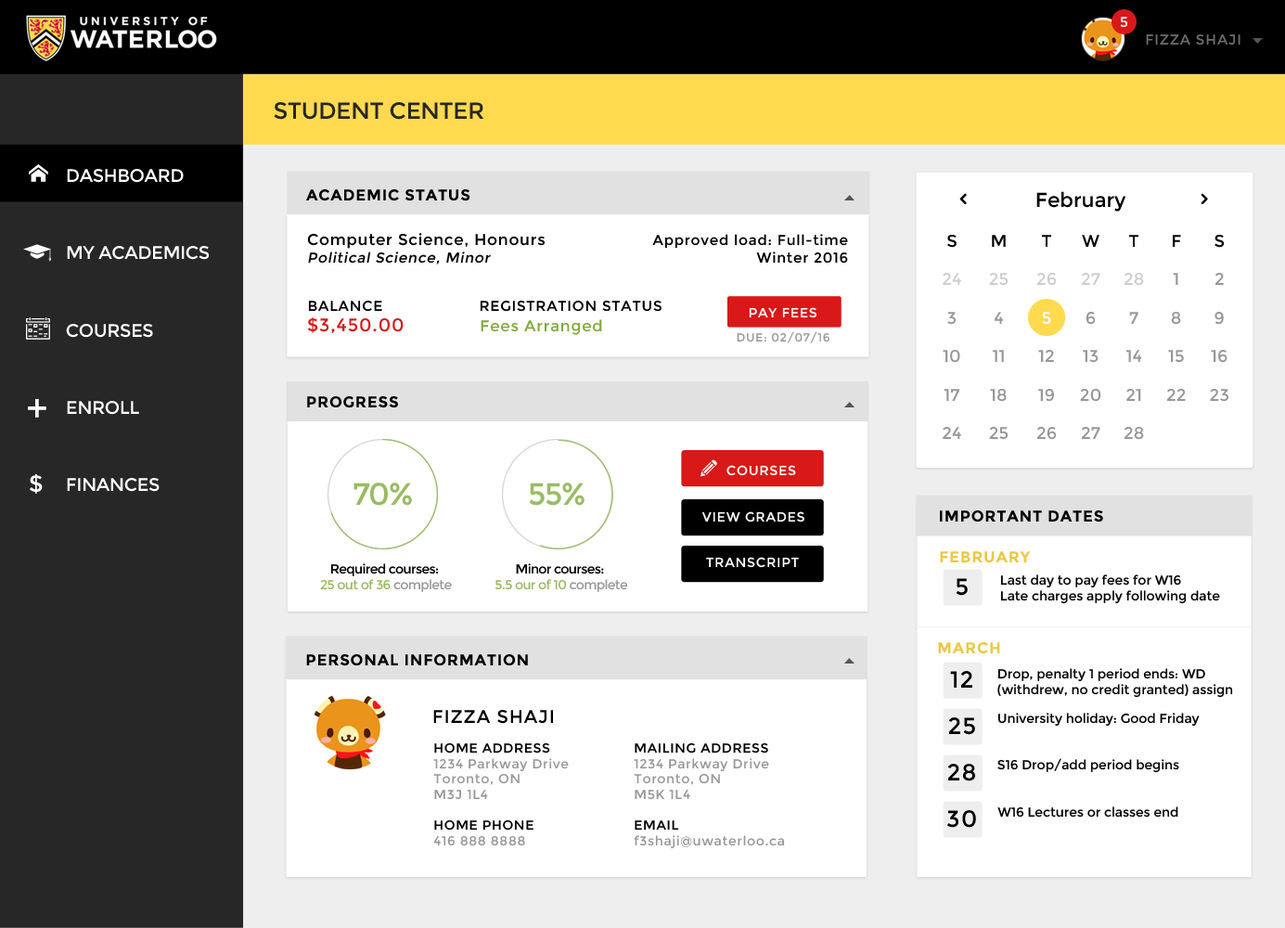
<style>
.page{position:relative;width:1285px;height:928px;background:#ffffff}
.page>*{position:absolute;margin:0}
.t1{font:14.2px "Montserrat-Regular";letter-spacing:0.05em;color:#eeeeee;text-transform:uppercase}
.t2{font:14.2px "Montserrat-Regular";letter-spacing:0.05em;color:#6b6b6b;text-transform:uppercase}
.t3{font:23.2px "Montserrat-Regular";letter-spacing:-0.02em;color:#272727;text-transform:uppercase}
.t4{font:18px/77.3px "Montserrat-Regular";letter-spacing:-0.02em;color:#ffffff;text-transform:uppercase}
.t5{font:15.5px "Montserrat-Bold";letter-spacing:0.05em;color:#000000;text-transform:uppercase}
.t6{font:20.2px "Montserrat-Regular";color:#000000}
.t7{font:15.5px/18px "Montserrat-Regular";letter-spacing:0.05em;color:#000000}
.t8{font:14.2px/18px "Montserrat-Regular";letter-spacing:0.05em;color:#000000;font-style:italic}
.t9{font:14.2px/18px "Montserrat-Regular";letter-spacing:0.05em;color:#000000}
.t10{font:17px/38.6px "Montserrat-Regular";color:#989898}
.t11{font:17px/38.6px "Montserrat-Regular";color:#000000}
.t12{font:17px/38.6px "Montserrat-Regular";color:#ffffff}
.t13{font:17px "Montserrat-Regular";color:#cecece}
.t14{font:14.2px "Montserrat-Regular";letter-spacing:0.05em;color:#000000;text-transform:uppercase}
.t15{font:15.5px "Montserrat-Regular";letter-spacing:0.05em;color:#80ab3c}
.t16{font:18px "Montserrat-Regular";letter-spacing:0.05em;color:#d91818}
.t17{font:13.2px "Montserrat-Regular";letter-spacing:0.05em;color:#ffffff;text-transform:uppercase}
.t18{font:11.6px "Montserrat-Regular";letter-spacing:0.05em;color:#989898;text-transform:uppercase}
.t19{font:38.7px "Montserrat-Regular";color:#ffffff}
.t20{font:23.2px "Montserrat-Regular";color:#ffffff}
.t21{font:30.9px "Montserrat-Regular";letter-spacing:-0.04em;color:#99bc63}
.t22{font:15.5px "Montserrat-Bold";letter-spacing:0.05em;color:#eac848;text-transform:uppercase}
.t23{font:12.9px/15.8px "Montserrat-Regular";letter-spacing:-0.04em;color:#000000}
.t24{font:12.9px/15.8px "Montserrat-Regular";letter-spacing:-0.04em;color:#99bc63}
.t25{font:12.9px/15.8px "Montserrat-Regular";letter-spacing:-0.04em;color:#989898}
.t26{font:23.2px/46.4px "Montserrat-Regular";letter-spacing:0.05em;color:#000000;text-transform:uppercase}
.t27{font:12.9px/15.5px "Montserrat-Regular";color:#000000}
.t28{font:18px "Montserrat-Regular";letter-spacing:0.05em;color:#000000;text-transform:uppercase}
.t29{font:12.9px "Montserrat-Regular";color:#000000}
.t30{font:12.9px "Montserrat-Regular";letter-spacing:0.05em;color:#989898}
.t31{font:12.9px "Montserrat-Regular";letter-spacing:0.05em;color:#000000;text-transform:uppercase}
</style>
<div class="page">
<p class="t1" style="left:1120px;top:17px;width:8px;height:11px">5</p>
<p class="t2" style="left:1146px;top:33px;width:95px;height:12px">Fizza Shaji</p>
<p class="t3" style="left:274px;top:102px;width:210px;height:18px">student center</p>
<p class="t4" style="left:66px;top:169px;width:143px;height:323px">dashboard<br>my academics<br>courses<br>enroll<br>finances</p>
<p class="t5" style="left:306px;top:189px;width:164px;height:12px">academic status</p>
<p class="t6" style="left:1036px;top:191px;width:90px;height:21px">February</p>
<p class="t7" style="left:307px;top:233px;width:239px;height:31px">Computer Science, Honours<br><span class="t8">Political Science, Minor</span></p>
<p class="t9" style="left:652px;top:234px;width:196px;height:30px;text-align:right">Approved load: Full-time<br>Winter 2016</p>
<p class="t10" style="left:943px;top:235px;width:18px;height:204px;text-align:center"><span class="t11">S<br><br></span>3<br>10<br>17<br>24</p>
<p class="t10" style="left:989px;top:235px;width:20px;height:205px;text-align:center"><span class="t11">M<br><br></span>4<br>11<br>18<br>25</p>
<p class="t10" style="left:1037px;top:235px;width:20px;height:205px;text-align:center"><span class="t11">T<br></span><span class="t12"><br>5<br></span>12<br>19<br>26</p>
<p class="t10" style="left:1080px;top:235px;width:21px;height:204px;text-align:center"><span class="t11">W<br><br></span>6<br>13<br>20<br>27</p>
<p class="t10" style="left:1125px;top:235px;width:19px;height:205px;text-align:center"><span class="t11">T<br><br></span>7<br>14<br>21<br>28</p>
<p class="t10" style="left:1167px;top:235px;width:19px;height:166px;text-align:center"><span class="t11">F<br></span>1<br>8<br>15<br>22</p>
<p class="t10" style="left:1210px;top:235px;width:19px;height:167px;text-align:center"><span class="t11">S<br></span>2<br>9<br>16<br>23</p>
<p class="t13" style="left:943px;top:273px;width:18px;height:12px">24</p>
<p class="t13" style="left:989px;top:273px;width:20px;height:13px">25</p>
<p class="t13" style="left:1037px;top:273px;width:20px;height:13px">26</p>
<p class="t13" style="left:1082px;top:273px;width:18px;height:12px">27</p>
<p class="t13" style="left:1125px;top:273px;width:19px;height:13px">28</p>
<p class="t14" style="left:308px;top:300px;width:354px;height:12px">Balance     Registration status</p>
<p class="t15" style="left:307px;top:317px;width:295px;height:18px"><span class="t16">$3,450.00    </span>Fees Arranged</p>
<p class="t17" style="left:749px;top:307px;width:68px;height:11px">pay fees</p>
<p class="t18" style="left:737px;top:331px;width:93px;height:12px">Due: 02/07/16</p>
<p class="t19" style="left:28px;top:399px;width:18px;height:19px">+</p>
<p class="t5" style="left:307px;top:396px;width:91px;height:12px">Progress</p>
<p class="t17" style="left:727px;top:465px;width:69px;height:11px">courses</p>
<p class="t20" style="left:30px;top:474px;width:13px;height:20px">$</p>
<p class="t21" style="left:354px;top:482px;width:58px;height:24px">70%</p>
<p class="t21" style="left:529px;top:482px;width:56px;height:24px">55%</p>
<p class="t17" style="left:701px;top:511px;width:103px;height:11px">view grades</p>
<p class="t5" style="left:940px;top:510px;width:163px;height:12px">important dates</p>
<p class="t17" style="left:706px;top:557px;width:93px;height:11px">transcript</p>
<p class="t22" style="left:940px;top:551px;width:91px;height:11px">FEBruary</p>
<p class="t23" style="left:320px;top:563px;width:132px;height:29px;text-align:center">Required courses: <br><span class="t24">25 out of 36 </span><span class="t25">complete</span></p>
<p class="t23" style="left:495px;top:563px;width:133px;height:29px;text-align:center">Minor courses: <br><span class="t24">5.5 our of 10 </span><span class="t25">complete</span></p>
<p class="t26" style="left:947px;top:578px;width:29px;height:250px;text-align:center">5<br><br>12<br>25<br>28<br>30</p>
<p class="t27" style="left:1000px;top:574px;width:220px;height:30px">Last day to pay fees for W16<br>Late charges apply following date</p>
<p class="t22" style="left:938px;top:642px;width:62px;height:12px">March</p>
<p class="t5" style="left:306px;top:654px;width:222px;height:12px">personal information</p>
<p class="t27" style="left:997px;top:668px;width:236px;height:30px">Drop, penalty 1 period ends: WD<br>(withdrew, no credit granted) assign</p>
<p class="t28" style="left:433px;top:710px;width:120px;height:14px">Fizza Shaji</p>
<p class="t29" style="left:997px;top:713px;width:203px;height:14px">University holiday: Good Friday</p>
<p class="t30" style="left:433px;top:742px;width:136px;height:104px"><span class="t31">home address<br></span>1234 Parkway Drive<br>Toronto, ON<br>M3J 1L4<br><br><span class="t31">home phone<br></span>416 888 8888</p>
<p class="t30" style="left:634px;top:742px;width:151px;height:107px"><span class="t31">mailing address<br></span>1234 Parkway Drive<br>Toronto, ON<br>M5K 1L4<br><br><span class="t31">email<br></span>f3shaji@uwaterloo.ca</p>
<p class="t29" style="left:997px;top:758px;width:182px;height:15px">S16 Drop/add period begins</p>
<p class="t29" style="left:997px;top:806px;width:181px;height:11px">W16 Lectures or classes end</p>
</div>
